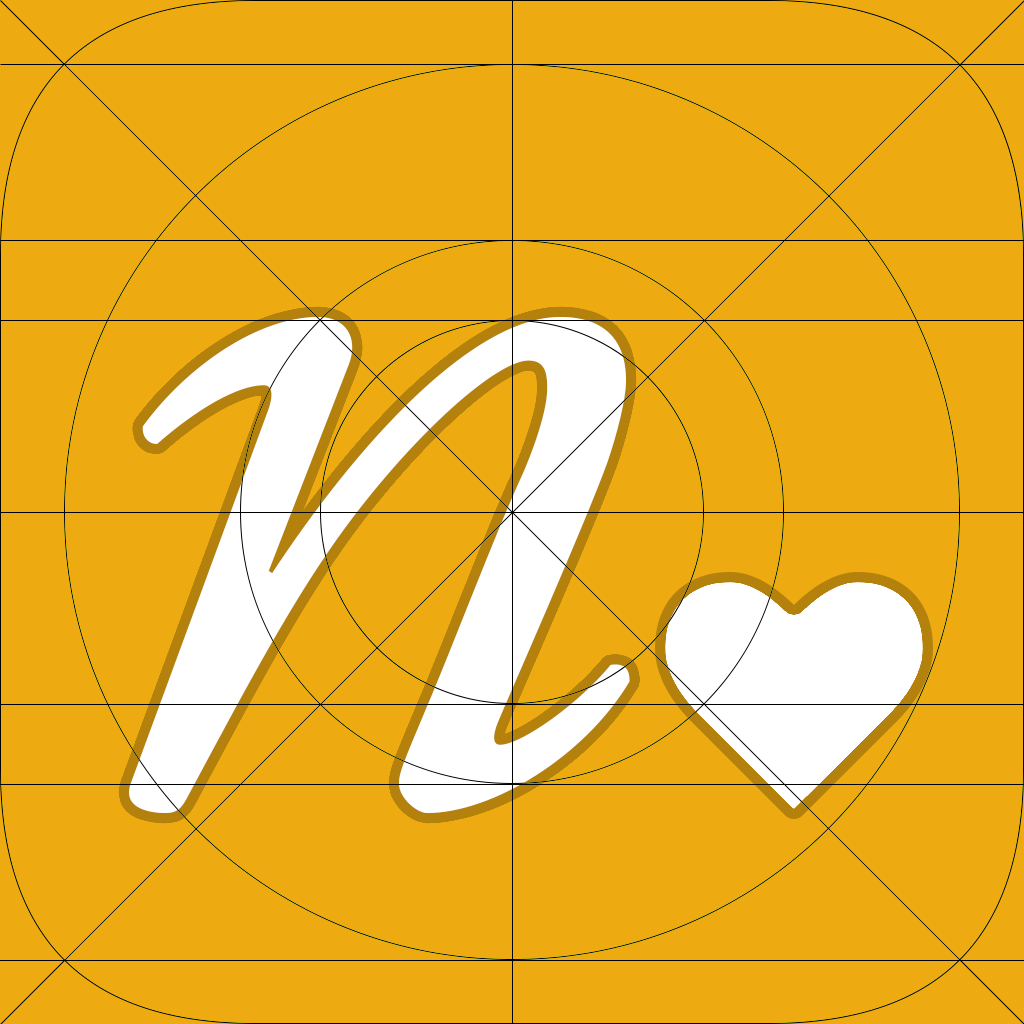
<style>
.page{position:relative;width:1024px;height:1024px;background:#eeaa11}
.page>*{position:absolute;margin:0}
.t1{font:1175px "AGaramondPro-Italic";color:#ffffff}
</style>
<div class="page">
<p class="t1" style="left:129px;top:317px;width:501px;height:496px">n</p>
</div>
